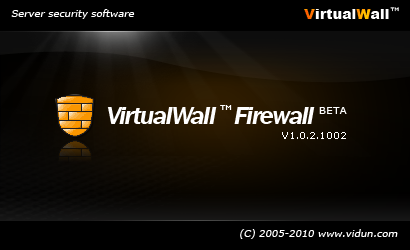
<style>
.page{position:relative;width:410px;height:250px;background:#000000}
.page>*{position:absolute;margin:0}
.t1{font:10px "Verdana";color:#ffffff;font-style:italic}
.t2{font:13.6px "Arial-Black";letter-spacing:0.025em;color:#ffffff}
.t3{font:13.6px "Arial-Black";letter-spacing:0.025em;color:#ff9900}
.t4{font:4.2px "04b08";letter-spacing:0.025em}
.t5{font:24.5px "FranklinGothicITCbyBT-DemiItal";letter-spacing:-0.05em;color:#ffffff}
.t6{font:6px "04b08";letter-spacing:-0.05em;color:#ffffff}
.t7{font:10px "Verdana";letter-spacing:0.05em;color:#ffffff}
.t8{font:9px "Verdana";color:#ffffff}
</style>
<div class="page">
<p class="t1" style="left:11px;top:9px;width:124px;height:10px">Server security software</p>
<p class="t2" style="left:304px;top:9px;width:85px;height:10px"><span class="t3">V</span>irtual<span class="t3">W</span>all</p>
<p class="t4" style="left:390px;top:7px;width:9px;height:5px">TM</p>
<p class="t5" style="left:107px;top:107px;width:110px;height:17px">VirtualWall</p>
<p class="t6" style="left:220px;top:105px;width:12px;height:5px">TM</p>
<p class="t5" style="left:234px;top:107px;width:81px;height:17px">Firewall</p>
<p class="t7" style="left:319px;top:107px;width:28px;height:7px">BETA</p>
<p class="t8" style="left:282px;top:132px;width:64px;height:7px">V1.0.2.1002</p>
<p class="t1" style="left:240px;top:229px;width:158px;height:10px">(C) 2005-2010 www.vidun.com</p>
</div>
